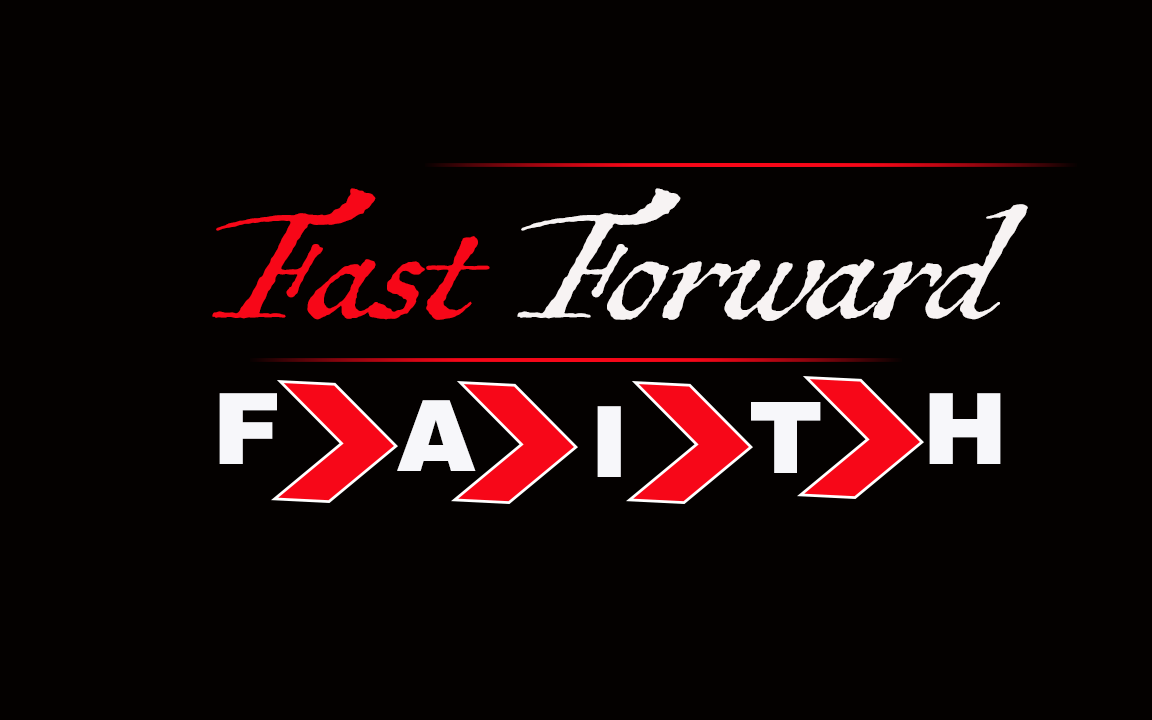
<style>
.page{position:relative;width:1152px;height:720px;background:#040100}
.page>*{position:absolute;margin:0}
.t1{font:195.9px "AntiquarianScribe";color:#f7f3f3}
.t2{font:195.9px "AntiquarianScribe";color:#f70718}
.t3{font:102.6px "ArchivoBlack-Regular";color:#f7f7fa}
</style>
<div class="page">
<p class="t1" style="left:212px;top:188px;width:816px;height:133px"><span class="t2">Fast </span>Forward</p>
<p class="t3" style="left:219px;top:393px;width:58px;height:71px">F</p>
<p class="t3" style="left:397px;top:400px;width:79px;height:71px">A</p>
<p class="t3" style="left:929px;top:393px;width:72px;height:71px">H</p>
<p class="t3" style="left:597px;top:406px;width:24px;height:71px">I</p>
<p class="t3" style="left:751px;top:402px;width:70px;height:71px">T</p>
</div>
